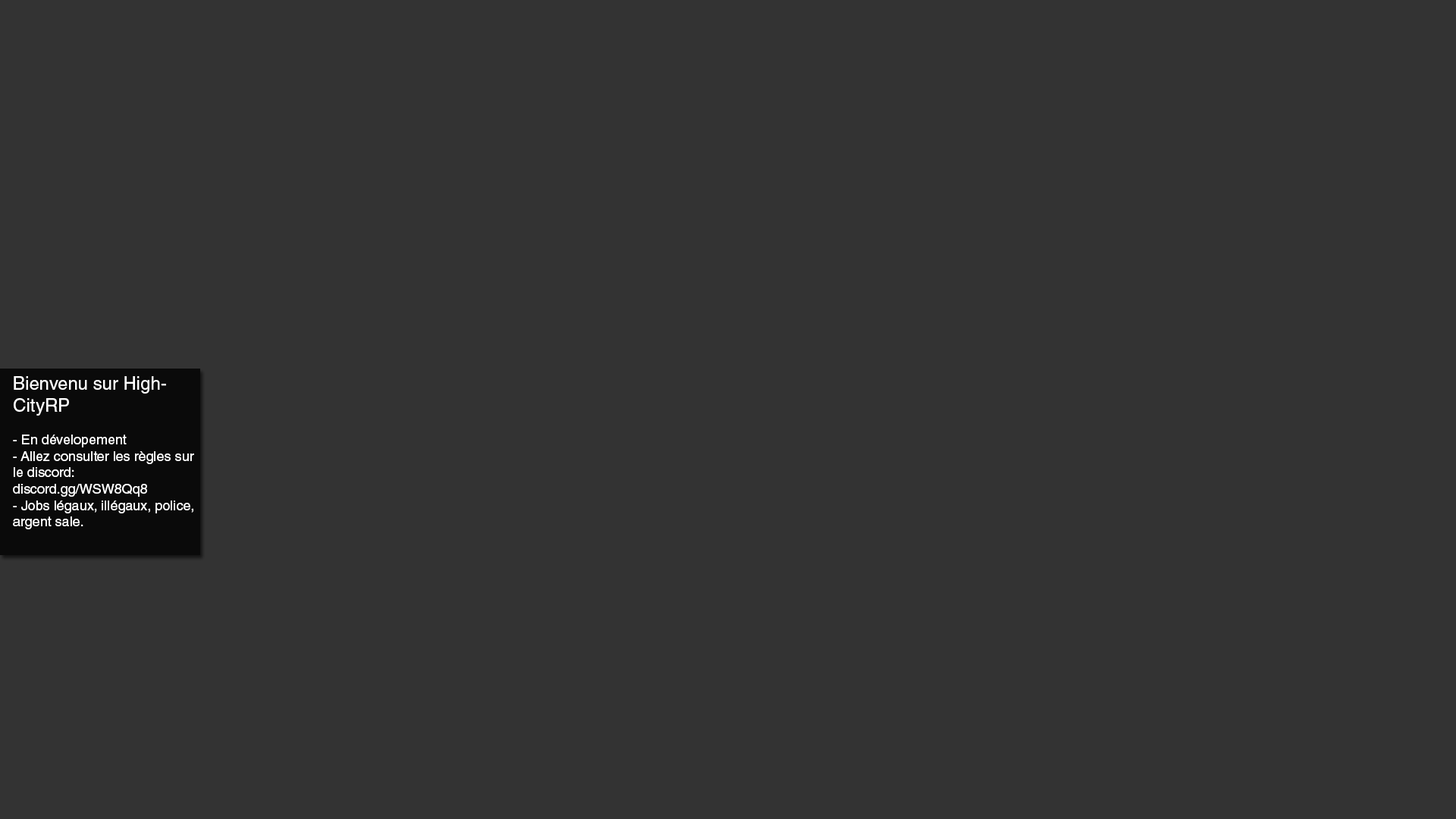
<style>
.page{position:relative;width:1456px;height:819px;background:#333333}
.page>*{position:absolute;margin:0}
.t1{font:13.6px "HelveticaLTStd-Roman";color:#ffffff}
.t2{font:18.2px "HelveticaLTStd-Roman";color:#ffffff}
</style>
<div class="page">
<p class="t1" style="left:13px;top:376px;width:181px;height:153px"><span class="t2">Bienvenu sur HighCityRP<br><br></span>- En dévelopement<br>- Allez consulter les règles sur le discord: <br>discord.gg/WSW8Qq8<br>- Jobs légaux, illégaux, police, argent sale.</p>
</div>
